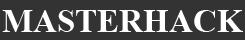
<style>
.page{position:relative;width:245px;height:40px;background:#333333}
.page>*{position:absolute;margin:0}
.t1{font:33px "TimesNewRomanPS-BoldMT";color:#ffffff}
</style>
<div class="page">
<p class="t1" style="left:2px;top:10px;width:241px;height:22px">MASTERHACK</p>
</div>
